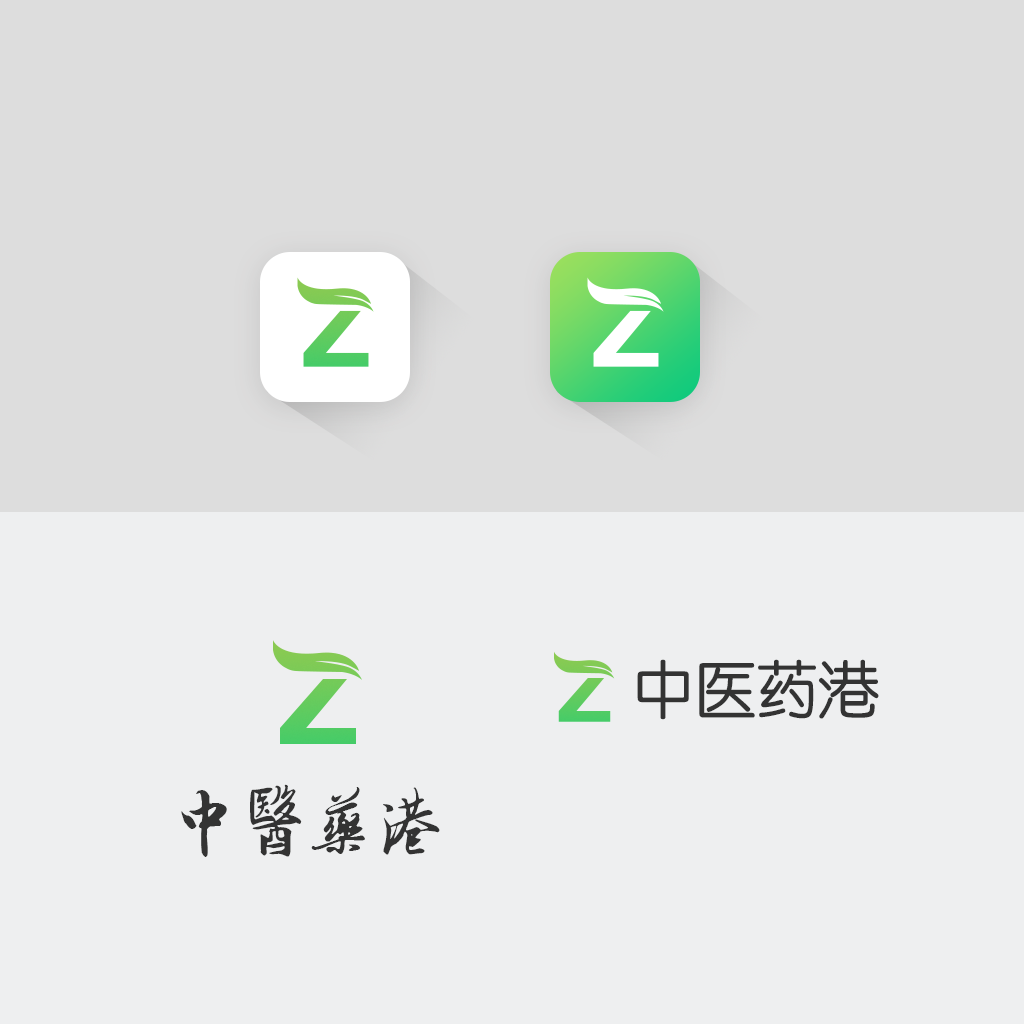
<style>
.page{position:relative;width:1024px;height:1024px;background:#eeeff0}
.page>*{position:absolute;margin:0}
.t1{font:62px "STYuanti-SC-Regular";color:#333333}
.t2{font:75.9px "SCFwxz";color:#333333;scale:0.9 1}
</style>
<div class="page">
<p class="t1" style="left:637px;top:659px;width:242px;height:61px">中医药港</p>
<p class="t2" style="left:181px;top:784px;width:259px;height:73px">中医药港</p>
</div>
